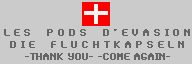
<style>
.page{position:relative;width:192px;height:64px;background:#cbcbcb}
.page>*{position:absolute;margin:0}
.t1{font:10px "SynchroLET";color:#666666;font-weight:bold}
</style>
<div class="page">
<p class="t1" style="left:4px;top:29px;width:186px;height:31px;text-align:center">L e s    P o d s    d ’ E v a s i o n<br>D i e    F l u c h t k a p s e l n<br>-thank you- -come again-</p>
</div>
